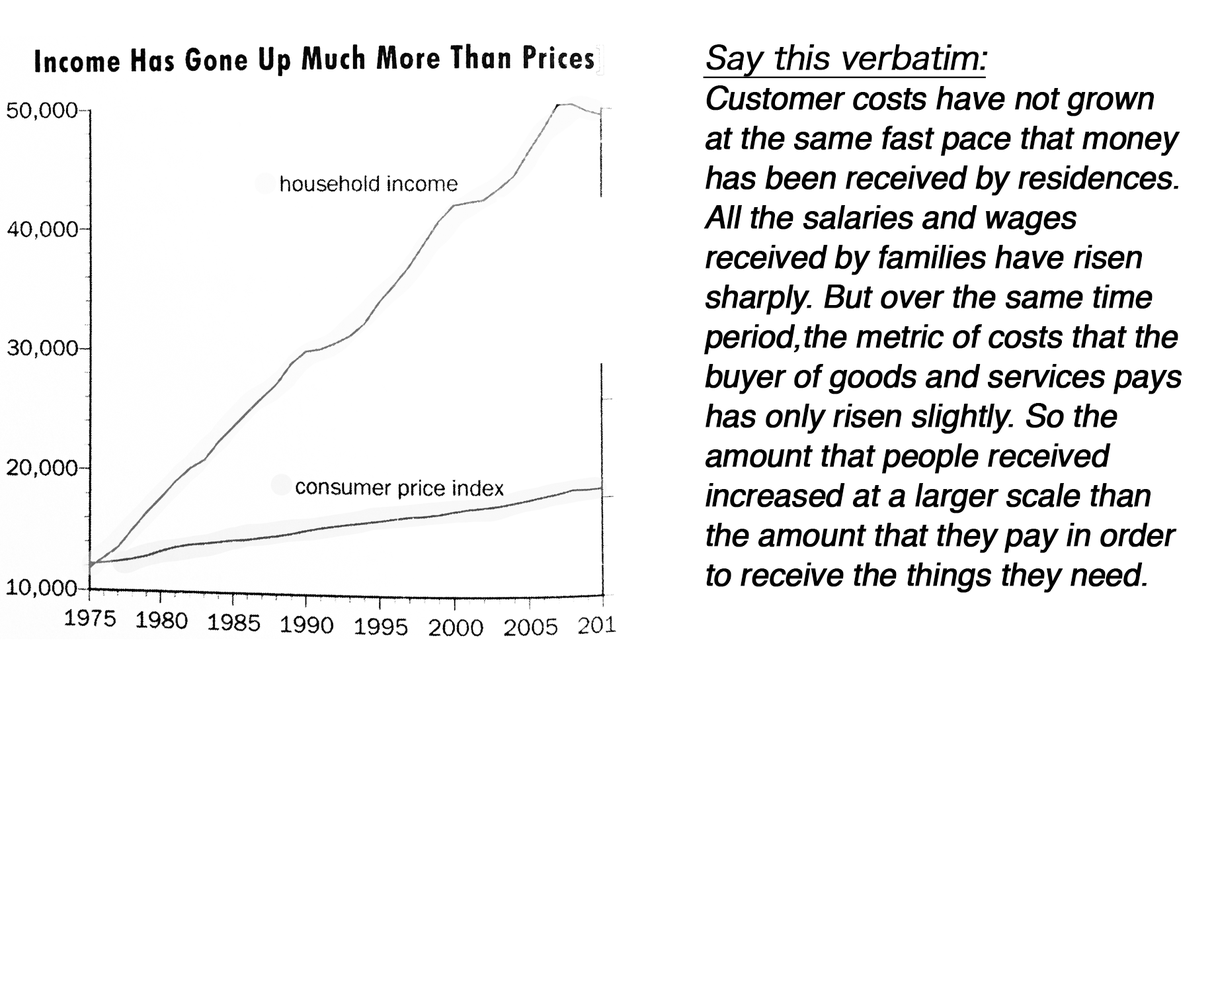
<style>
.page{position:relative;width:1212px;height:984px;background:#ffffff}
.page>*{position:absolute;margin:0}
.t1{font:31.7px/39.7px "Helvetica";letter-spacing:-0.025em;color:#000000;font-weight:bold;font-style:italic}
.t2{font:31.7px/39.7px "HiraKakuProN-W3";letter-spacing:-0.025em;color:#000000;font-weight:bold;font-style:italic;text-decoration:underline}
</style>
<div class="page">
<p class="t1" style="left:703px;top:44px;width:479px;height:549px"><span class="t2">Say this verbatim:<br></span>Customer costs have not grown at the same fast pace that money has been received by residences. All the salaries and wages received by families have risen sharply. But over the same time period,the metric of costs that the buyer of goods and services pays has only risen slightly. So the amount that people received increased at a larger scale than the amount that they pay in order to receive the things they need.</p>
</div>
